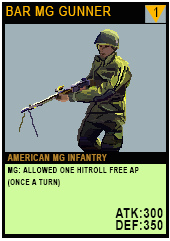
<style>
.page{position:relative;width:170px;height:241px;background:#a0b2b8}
.page>*{position:absolute;margin:0}
.t1{font:12.8px "ArialMT";letter-spacing:0.08em;color:#ffb800;text-transform:uppercase;scale:0.86 1}
.t2{font:12.8px "ArialMT";letter-spacing:0.08em;color:#050400;text-transform:uppercase;scale:0.86 1}
.t3{font:8.1px/12.2px "Arial-BoldMT";letter-spacing:0.08em;color:#000000;text-transform:uppercase;scale:0.76 1}
.t4{font:9.3px/20.2px "Arial-BoldMT";letter-spacing:0.08em;color:#b4832c;text-transform:uppercase;scale:0.76 1}
.t5{font:13.9px/12px "Arial-BoldMT";letter-spacing:0.08em;color:#050606;text-transform:uppercase;scale:0.76 1}
</style>
<div class="page">
<p class="t1" style="left:6px;top:6px;width:105px;height:10px">Bar mg gunner</p>
<p class="t2" style="left:154px;top:7px;width:4px;height:10px">1</p>
<p class="t3" style="left:7px;top:154px;width:156px;height:76px"><span class="t4">american mg infantry<br></span>mg: allowed one hitroll free ap (once a turn)<br><br><span class="t5">atk:300<br>def:350</span></p>
</div>
